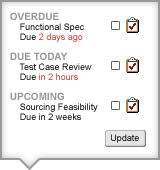
<style>
.page{position:relative;width:160px;height:170px;background:#ffffff}
.page>*{position:absolute;margin:0}
.t1{font:9px/10px "ArialMT";color:#000000}
.t2{font:10px/10px "Arial-BoldMT";color:#999999}
.t3{font:9px/10px "ArialMT";color:#cc3333}
.t4{font:9px "ArialMT"}
</style>
<div class="page">
<p class="t1" style="left:10px;top:12px;width:88px;height:108px"><span class="t2">OVERDUE<br></span>    Functional Spec<br>    Due <span class="t3">2 days ago<br>  <br></span><span class="t2">DUE TODAY<br></span>    Test Case Review<br>    Due <span class="t3">in 2 hours<br><br></span><span class="t2">UPCOMING<br></span>    Sourcing Feasibility<br>    Due in 2 weeks</p>
<p class="t4" style="left:111px;top:134px;width:28px;height:9px">Update</p>
</div>
